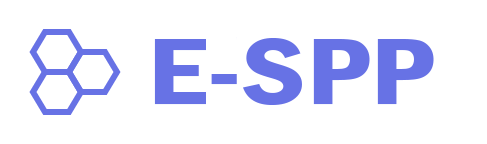
<style>
.page{position:relative;width:487px;height:144px;background:#ffffff}
.page>*{position:absolute;margin:0}
.t1{font:96.8px "FranklinGothic-DemiCond";color:#6772e5;text-transform:uppercase;scale:1.3 1}
</style>
<div class="page">
<p class="t1" style="left:154px;top:38px;width:280px;height:67px">E-SPP</p>
</div>
